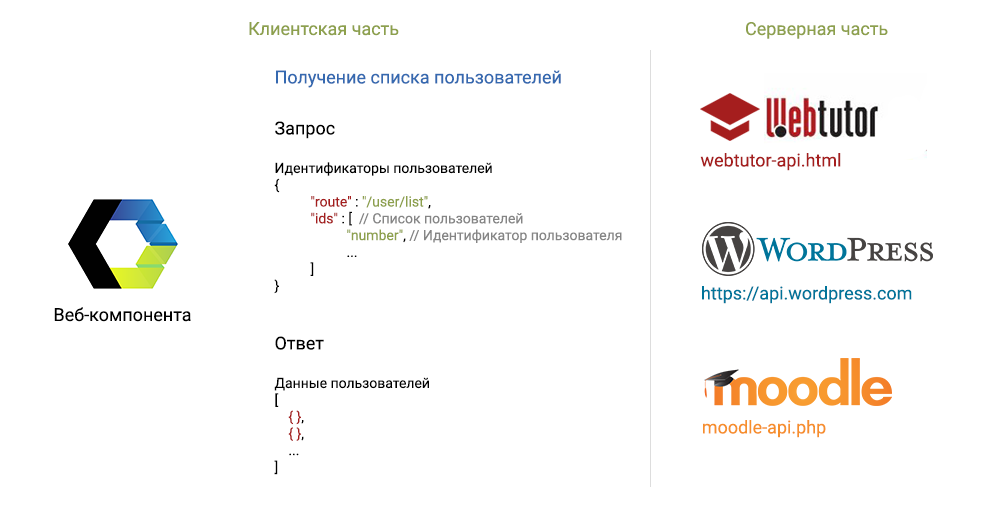
<style>
.page{position:relative;width:1000px;height:530px;background:#ffffff}
.page>*{position:absolute;margin:0}
.t1{font:18px "Roboto-Regular";color:#8da04c}
.t2{font:18px "Roboto-Regular";color:#3569b0}
.t3{font:14px "Roboto-Regular";color:#000000}
.t4{font:18px "Roboto-Regular";color:#000000}
.t5{font:14px "Roboto-Regular";color:#a51e1e}
.t6{font:14px "Roboto-Regular";color:#8da04c}
.t7{font:14px "Roboto-Regular";color:#858585}
.t8{font:18px "Roboto-Regular";color:#a51e1e}
.t9{font:18px "Roboto-Regular";color:#00749a}
.t10{font:18px "Roboto-Regular";color:#010101}
.t11{font:18px "Roboto-Regular";color:#f68f2c}
</style>
<div class="page">
<p class="t1" style="left:249px;top:22px;width:150px;height:14px">Клиентская часть</p>
<p class="t1" style="left:746px;top:22px;width:142px;height:17px">Серверная часть</p>
<p class="t2" style="left:276px;top:70px;width:285px;height:18px">Получение списка пользователей</p>
<p class="t3" style="left:274px;top:121px;width:348px;height:173px"><span class="t4">Запрос <br><br></span>Идентификаторы пользователей<br>{<br> <span class="t5">"route"</span> : <span class="t6">"/user/list"</span>,<br> <span class="t5">"ids"</span> : [  <span class="t7">// Список пользователей<br>          </span><span class="t6">"number"</span>, <span class="t7">// Идентификатор пользователя<br></span>          ...<br>     ]<br>}</p>
<p class="t8" style="left:700px;top:153px;width:141px;height:18px">webtutor-api.html</p>
<p class="t9" style="left:702px;top:286px;width:210px;height:18px">https://api.wordpress.com</p>
<p class="t10" style="left:54px;top:307px;width:137px;height:15px">Веб-компонента</p>
<p class="t3" style="left:274px;top:336px;width:155px;height:139px"><span class="t4">Ответ <br><br></span>Данные пользователей<br>[<br>    <span class="t5">{ }</span>,<br>    <span class="t5">{ }</span>, <br>    ...<br>]</p>
<p class="t11" style="left:703px;top:420px;width:123px;height:18px">moodle-api.php</p>
</div>
